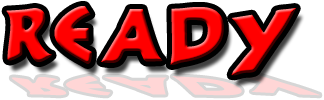
<style>
.page{position:relative;width:324px;height:100px;background:#ffffff}
.page>*{position:absolute;margin:0}
.t1{font:120px "300Trojans"}
</style>
<div class="page">
<p class="t1" style="left:6px;top:6px;width:290px;height:70px">Re     a     d    y</p>
</div>
